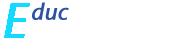
<style>
.page{position:relative;width:180px;height:50px;background:#ffffff}
.page>*{position:absolute;margin:0}
.t1{font:50px "MyriadPro-It";color:#12dbff;font-weight:bold}
.t2{font:24px "MyriadPro-It";color:#2d51a2;font-weight:bold}
</style>
<div class="page">
<p class="t1" style="left:4px;top:3px;width:26px;height:35px">E</p>
<p class="t2" style="left:32px;top:2px;width:37px;height:18px">duc</p>
</div>
